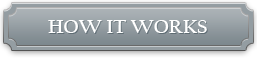
<style>
.page{position:relative;width:257px;height:58px}
.page>*{position:absolute;margin:0}
.t1{font:20px "CalifornianFB-Bold";color:#ffffff;text-transform:uppercase}
</style>
<div class="page">
<p class="t1" style="left:48px;top:20px;width:159px;height:13px">how it works</p>
</div>
